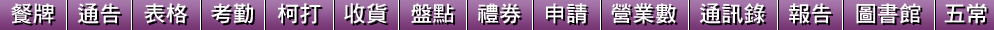
<style>
.page{position:relative;width:994px;height:30px}
.page>*{position:absolute;margin:0}
.t1{font:22px "DFHei-Bd-HK-BF";letter-spacing:0.01em;color:#ffffff}
</style>
<div class="page">
<p class="t1" style="left:11px;top:3px;width:976px;height:21px">餐牌　通告　表格　考勤　柯打　收貨　盤點　禮券　申請　營業數　通訊錄　報告　圖書館　五常</p>
</div>
